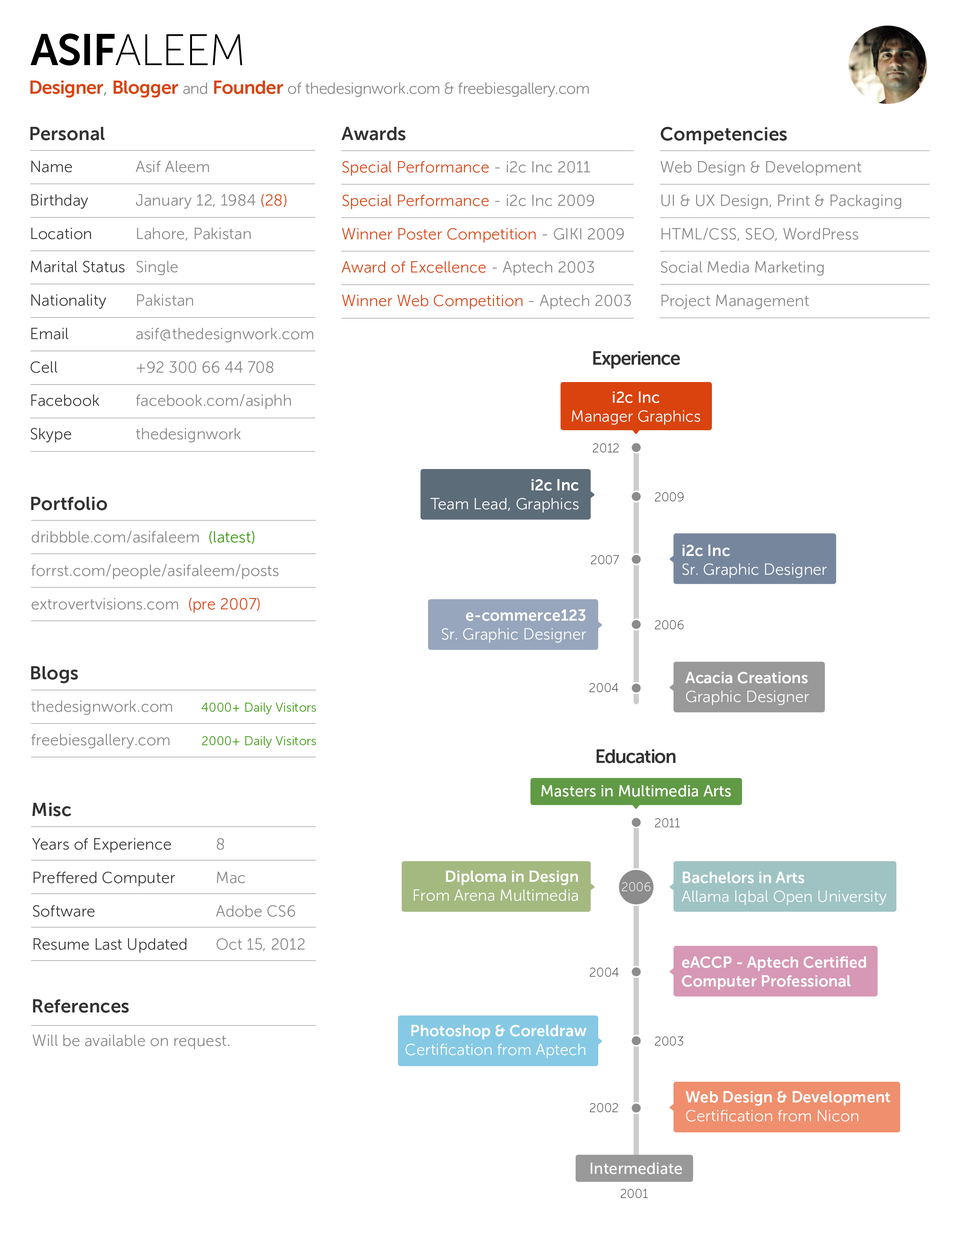
<style>
.page{position:relative;width:960px;height:1242px;background:#ffffff}
.page>*{position:absolute;margin:0}
.t1{font:43.9px "MuseoSans-100";letter-spacing:-0.025em;color:#000000;text-transform:uppercase}
.t2{font:43.9px "MuseoSans-700";letter-spacing:-0.025em;color:#000000;text-transform:uppercase}
.t3{font:15.7px "MuseoSans-300";letter-spacing:-0.025em;color:#868686}
.t4{font:18.8px "MuseoSans-700";letter-spacing:-0.025em;color:#da430e}
.t5{font:18.8px "MuseoSans-300";letter-spacing:-0.025em;color:#868686}
.t6{font:18.8px "MuseoSans-700";color:#333333}
.t7{font:15.7px/33.4px "MuseoSans-300";color:#333333}
.t8{font:15.7px/33.4px "MuseoSans-300";color:#868686}
.t9{font:15.7px/33.4px "MuseoSans-300";color:#da430e}
.t10{font:18.8px "MuseoSans-700";letter-spacing:-0.05em;color:#333333}
.t11{font:15.7px/18.8px "MuseoSans-300";color:#ffffff}
.t12{font:15.7px/18.8px "MuseoSans-500";color:#ffffff}
.t13{font:12.5px "MuseoSans-100";color:#333333}
.t14{font:15.7px/18.8px "MuseoSans-700";color:#ffffff}
.t15{font:15.7px/33.4px "MuseoSans-300";color:#339900}
.t16{font:12.5px/33.4px "MuseoSans-300";color:#339900}
.t17{font:15.7px "MuseoSans-500";color:#ffffff}
.t18{font:12.5px "MuseoSans-100";color:#ffffff}
.t19{font:15.7px "MuseoSans-300";color:#868686}
</style>
<div class="page">
<p class="t1" style="left:30px;top:33px;width:212px;height:33px"><span class="t2">Asif</span>Aleem</p>
<p class="t3" style="left:30px;top:81px;width:559px;height:17px"><span class="t4">Designer</span><span class="t5">, </span><span class="t4">Blogger </span>and <span class="t4">Founder </span>of thedesignwork.com &amp; freebiesgallery.com</p>
<p class="t6" style="left:30px;top:127px;width:75px;height:13px">Personal</p>
<p class="t6" style="left:341px;top:127px;width:64px;height:13px">Awards</p>
<p class="t6" style="left:661px;top:127px;width:126px;height:18px">Competencies</p>
<p class="t7" style="left:30px;top:161px;width:95px;height:282px">Name<br>Birthday<br>Location<br>Marital Status<br>Nationality<br>Email<br>Cell<br>Facebook<br>Skype</p>
<p class="t8" style="left:136px;top:161px;width:177px;height:282px">Asif Aleem<br>January 12, 1984 <span class="t9">(28)<br></span>Lahore, Pakistan<br>Single<br>Pakistan<br>asif@thedesignwork.com<br>+92 300 66 44 708<br>facebook.com/asiphh<br>thedesignwork</p>
<p class="t9" style="left:341px;top:161px;width:290px;height:148px">Special Performance<span class="t8"> - i2c Inc 2011<br></span>Special Performance<span class="t8"> - i2c Inc 2009<br></span>Winner Poster Competition<span class="t8"> - GIKI 2009<br></span>Award of Excellence<span class="t8"> - Aptech 2003<br></span>Winner Web Competition<span class="t8"> - Aptech 2003</span></p>
<p class="t8" style="left:660px;top:161px;width:241px;height:148px">Web Design &amp; Development<br>UI &amp; UX Design, Print &amp; Packaging<br>HTML/CSS, SEO, WordPress<br>Social Media Marketing<br>Project Management</p>
<p class="t10" style="left:593px;top:351px;width:87px;height:18px">Experience</p>
<p class="t11" style="left:572px;top:391px;width:128px;height:34px;text-align:center"><span class="t12">i2c Inc<br></span>Manager Graphics</p>
<p class="t13" style="left:593px;top:443px;width:26px;height:9px">2012</p>
<p class="t11" style="left:430px;top:479px;width:149px;height:34px;text-align:right"><span class="t14">i2c Inc<br></span>Team Lead, Graphics</p>
<p class="t6" style="left:31px;top:497px;width:76px;height:13px">Portfolio</p>
<p class="t13" style="left:655px;top:492px;width:29px;height:9px">2009</p>
<p class="t8" style="left:31px;top:531px;width:248px;height:82px">dribbble.com/asifaleem  <span class="t15">(latest)<br></span>forrst.com/people/asifaleem/posts<br>extrovertvisions.com  <span class="t9">(pre 2007)</span></p>
<p class="t11" style="left:682px;top:545px;width:145px;height:33px"><span class="t14">i2c Inc<br></span>Sr. Graphic Designer</p>
<p class="t13" style="left:591px;top:555px;width:28px;height:9px">2007</p>
<p class="t11" style="left:442px;top:609px;width:144px;height:34px;text-align:right"><span class="t14">e-commerce123<br></span>Sr. Graphic Designer</p>
<p class="t13" style="left:655px;top:620px;width:29px;height:9px">2006</p>
<p class="t6" style="left:31px;top:666px;width:47px;height:18px">Blogs</p>
<p class="t14" style="left:685px;top:672px;width:124px;height:33px">Acacia Creations<br><span class="t11">Graphic Designer</span></p>
<p class="t13" style="left:589px;top:683px;width:29px;height:9px">2004</p>
<p class="t8" style="left:31px;top:701px;width:141px;height:48px">thedesignwork.com<br>freebiesgallery.com</p>
<p class="t16" style="left:201px;top:703px;width:115px;height:45px;text-align:right">4000+ Daily Visitors<br>2000+ Daily Visitors</p>
<p class="t10" style="left:596px;top:749px;width:80px;height:14px">Education</p>
<p class="t17" style="left:541px;top:785px;width:190px;height:12px">Masters in Multimedia Arts</p>
<p class="t6" style="left:32px;top:803px;width:39px;height:13px">Misc</p>
<p class="t13" style="left:655px;top:818px;width:25px;height:9px">2011</p>
<p class="t7" style="left:32px;top:838px;width:154px;height:115px">Years of Experience<br>Preffered Computer<br>Software<br>Resume Last Updated</p>
<p class="t8" style="left:216px;top:838px;width:89px;height:113px">8<br>Mac<br>Adobe CS6<br>Oct 15, 2012</p>
<p class="t11" style="left:414px;top:871px;width:164px;height:30px;text-align:right"><span class="t14">Diploma in Design<br></span>From Arena Multimedia</p>
<p class="t11" style="left:681px;top:872px;width:206px;height:33px"><span class="t14">Bachelors in Arts<br></span>Allama Iqbal Open University</p>
<p class="t18" style="left:622px;top:882px;width:28px;height:9px">2006</p>
<p class="t14" style="left:682px;top:957px;width:184px;height:33px">eACCP - Aptech Certified <br>Computer Professional</p>
<p class="t13" style="left:590px;top:968px;width:29px;height:9px">2004</p>
<p class="t6" style="left:33px;top:999px;width:96px;height:14px">References</p>
<p class="t11" style="left:405px;top:1025px;width:181px;height:34px;text-align:right"><span class="t14">Photoshop &amp; Coreldraw<br></span>Certification from Aptech</p>
<p class="t19" style="left:32px;top:1035px;width:197px;height:15px">Will be available on request.</p>
<p class="t13" style="left:655px;top:1037px;width:28px;height:9px">2003</p>
<p class="t14" style="left:685px;top:1091px;width:205px;height:31px">Web Design &amp; Development<br><span class="t11">Certification from Nicon</span></p>
<p class="t13" style="left:590px;top:1103px;width:28px;height:9px">2002</p>
<p class="t17" style="left:591px;top:1163px;width:91px;height:11px">Intermediate</p>
<p class="t13" style="left:621px;top:1189px;width:27px;height:9px">2001</p>
</div>
